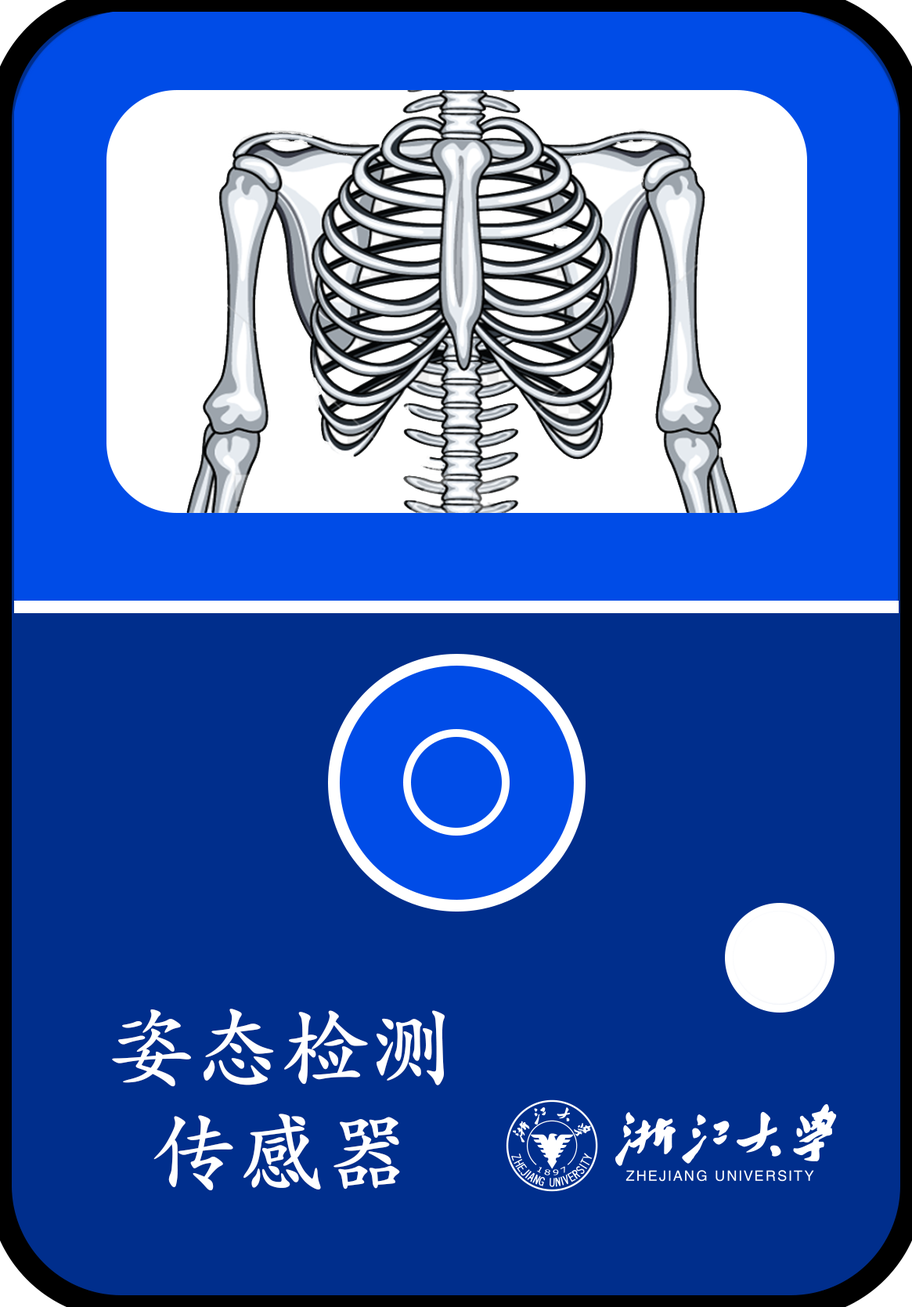
<style>
.page{position:relative;width:912px;height:1307px;background:#002e8c}
.page>*{position:absolute;margin:0}
.t1{font:87.6px "STKaitiTC-Bold";color:#ffffff}
</style>
<div class="page">
<p class="t1" style="left:112px;top:1009px;width:333px;height:181px;text-align:center">姿态检测<br>传感器</p>
</div>
